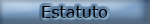
<style>
.page{position:relative;width:150px;height:24px}
.page>*{position:absolute;margin:0}
.t1{font:16px "Verdana";color:#000000}
</style>
<div class="page">
<p class="t1" style="left:42px;top:6px;width:66px;height:12px">Estatuto</p>
</div>
